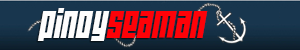
<style>
.page{position:relative;width:300px;height:50px;background:#18364e}
.page>*{position:absolute;margin:0}
.t1{font:36px "WideawakeBlack";color:#fe0208}
.t2{font:36px "WideawakeBlack";color:#fefdfd}
</style>
<div class="page">
<p class="t1" style="left:37px;top:8px;width:171px;height:33px"><span class="t2">Pinoy</span>seaman</p>
</div>
